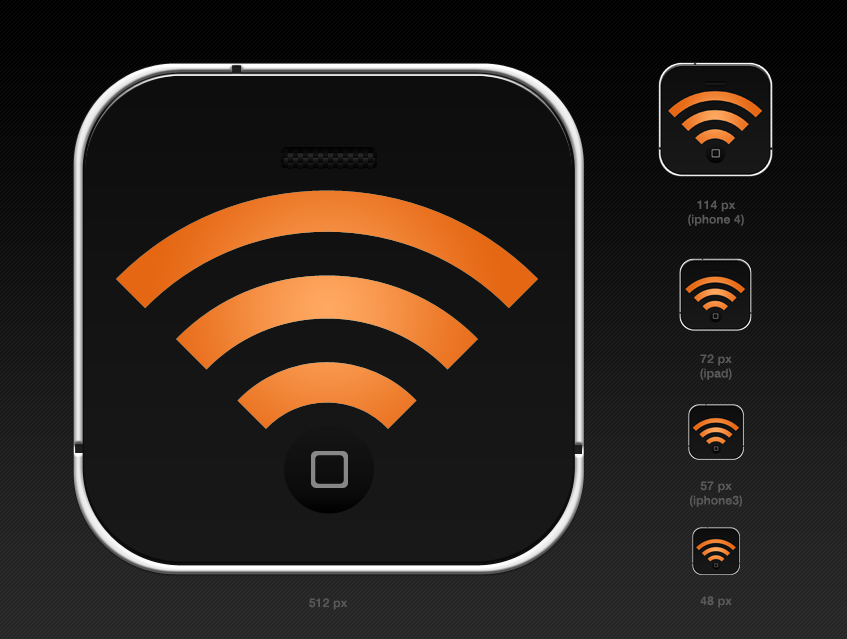
<style>
.page{position:relative;width:847px;height:639px}
.page>*{position:absolute;margin:0}
.t1{font:12px "HelveticaNeueLTPro-Md";letter-spacing:0.02em;color:#595959}
</style>
<div class="page">
<p class="t1" style="left:688px;top:200px;width:56px;height:26px;text-align:center">114 px<br>(iphone 4)</p>
<p class="t1" style="left:700px;top:354px;width:32px;height:26px;text-align:center">72 px<br>(ipad)</p>
<p class="t1" style="left:690px;top:481px;width:52px;height:26px;text-align:center">57 px<br>(iphone3)</p>
<p class="t1" style="left:309px;top:598px;width:39px;height:12px">512 px</p>
<p class="t1" style="left:700px;top:596px;width:32px;height:12px">48 px</p>
</div>
